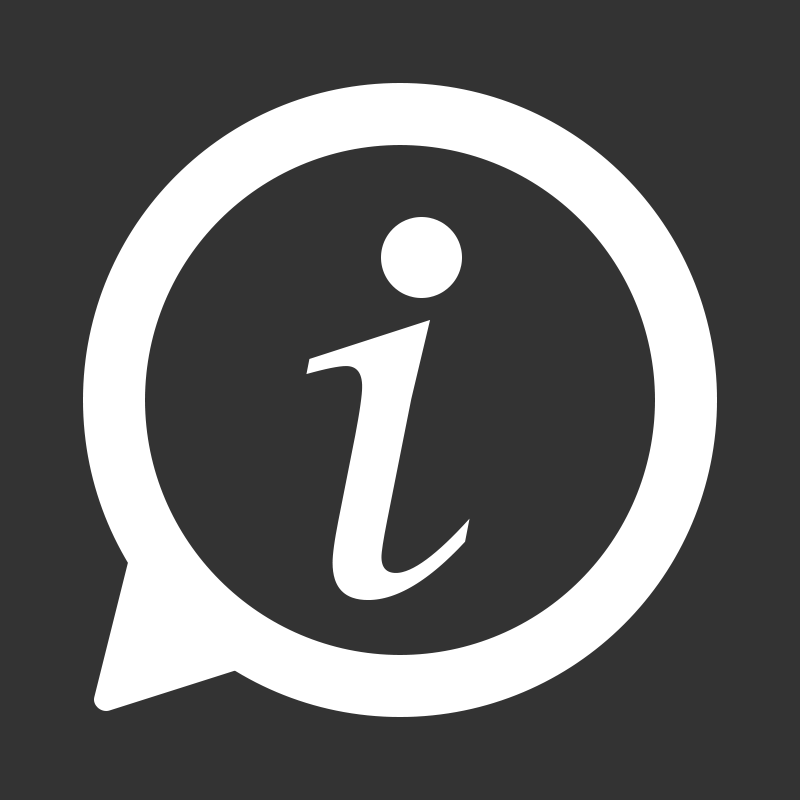
<style>
.page{position:relative;width:800px;height:800px;background:#333333}
.page>*{position:absolute;margin:0}
.t1{font:505.4px "LucidaCalligraphy-Italic";letter-spacing:-0.04em;color:#ffffff}
</style>
<div class="page">
<p class="t1" style="left:306px;top:198px;width:164px;height:402px">i</p>
</div>
